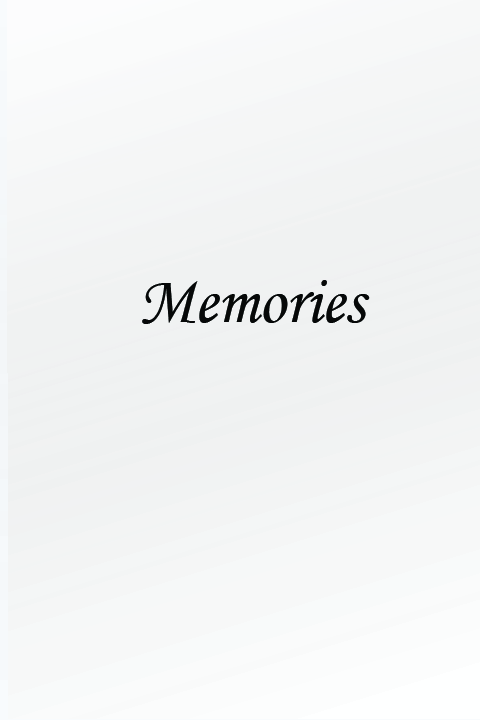
<style>
.page{position:relative;width:480px;height:720px}
.page>*{position:absolute;margin:0}
.t1{font:66.7px "MonotypeCorsiva";color:#060808}
</style>
<div class="page">
<p class="t1" style="left:142px;top:280px;width:228px;height:44px">Memories</p>
</div>
